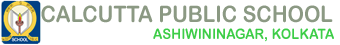
<style>
.page{position:relative;width:340px;height:45px;background:#ffffff}
.page>*{position:absolute;margin:0}
.t1{font:22.8px "ArialRoundedMTBold";color:#8b9983;scale:0.91 1}
.t2{font:1px "ArialRoundedMTBold";color:#ffffff;scale:0.91 1}
.t3{font:14.5px "ArialRoundedMTBold";color:#3dcd47;scale:0.91 1}
</style>
<div class="page">
<p class="t1" style="left:41px;top:5px;width:293px;height:37px"><span class="t2"><br></span>CALCUTTA PUBLIC SCHOOL<br><span class="t3">ASHIWININAGAR, KOLKATA</span></p>
</div>
